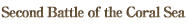
<style>
.page{position:relative;width:188px;height:26px;background:#ffffff}
.page>*{position:absolute;margin:0}
.t1{font:14px "RyuminPro-ExBold";letter-spacing:-0.08em;color:#68543c;font-weight:bold}
</style>
<div class="page">
<p class="t1" style="left:1px;top:6px;width:185px;height:12px">Second Battle of the Coral Sea</p>
</div>
